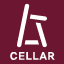
<style>
.page{position:relative;width:64px;height:64px;background:#6c1632}
.page>*{position:absolute;margin:0}
.t1{font:10px "YDIYGO350";letter-spacing:0.1em;color:#ffffff}
</style>
<div class="page">
<p class="t1" style="left:10px;top:52px;width:45px;height:8px">CELLAR</p>
</div>
